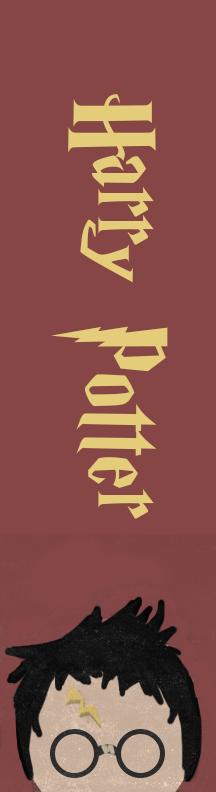
<style>
.page{position:relative;width:216px;height:792px;background:#864646}
.page>*{position:absolute;margin:0}
.t1{font:120px "HarryP";color:#e4cc7a}
</style>
<div class="page">
<p class="t1" style="left:51px;top:94px;width:117px;height:425px;rotate:90deg">Harry Potter</p>
</div>
